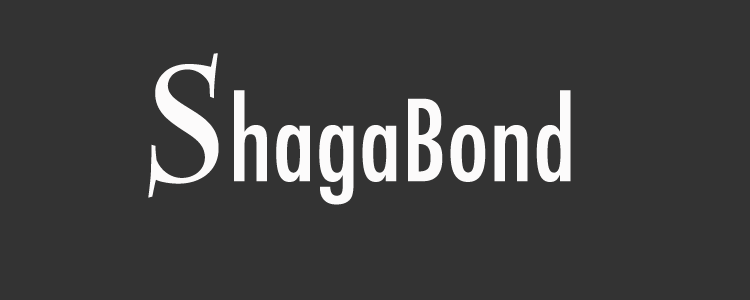
<style>
.page{position:relative;width:750px;height:300px;background:#333333}
.page>*{position:absolute;margin:0}
.t1{font:109.2px "Futura-CondensedMedium";color:#fcfbfb}
.t2{font:163.7px "CharlemagneStd-Bold";color:#fcfbfb}
</style>
<div class="page">
<p class="t1" style="left:148px;top:53px;width:423px;height:152px"><span class="t2">S</span>hagaBond</p>
</div>
